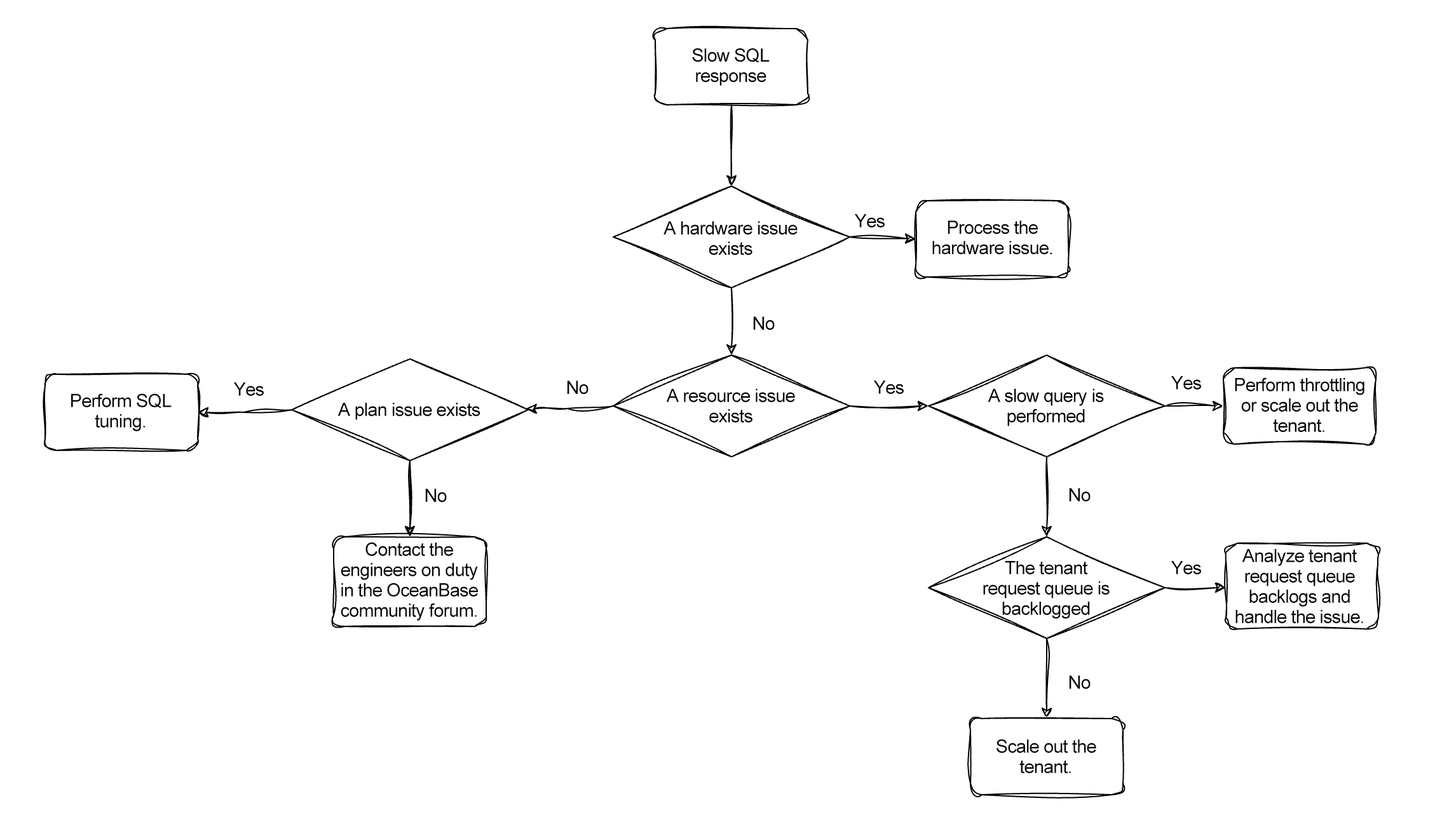
<style>
.page{position:relative;width:1435px;height:831px;background:#ffffff}
.page>*{position:absolute;margin:0}
.t1{font:18.4px/20.3px "ArialMT";letter-spacing:-0.03em;color:#060606}
.t2{font:18.4px "ArialMT";letter-spacing:-0.03em;color:#060606}
</style>
<div class="page">
<p class="t1" style="left:692px;top:48px;width:77px;height:38px;text-align:center">Slow SQL response</p>
<p class="t1" style="left:663px;top:221px;width:134px;height:34px;text-align:center">A hardware issue exists</p>
<p class="t2" style="left:855px;top:214px;width:29px;height:13px">Yes</p>
<p class="t1" style="left:932px;top:220px;width:120px;height:35px;text-align:center">Process the hardware issue.</p>
<p class="t2" style="left:753px;top:316px;width:22px;height:14px">No</p>
<p class="t2" style="left:1171px;top:376px;width:30px;height:14px">Yes</p>
<p class="t1" style="left:1235px;top:377px;width:129px;height:55px;text-align:center">Perform throttling or scale out the tenant.</p>
<p class="t2" style="left:234px;top:383px;width:30px;height:13px">Yes</p>
<p class="t2" style="left:567px;top:381px;width:21px;height:14px">No</p>
<p class="t1" style="left:666px;top:389px;width:129px;height:34px;text-align:center">A resource issue exists</p>
<p class="t2" style="left:874px;top:381px;width:30px;height:13px">Yes</p>
<p class="t1" style="left:987px;top:389px;width:117px;height:37px;text-align:center">A slow query is performed</p>
<p class="t1" style="left:71px;top:393px;width:101px;height:38px;text-align:center">Perform SQL tuning.</p>
<p class="t2" style="left:337px;top:403px;width:143px;height:17px">A plan issue exists</p>
<p class="t2" style="left:425px;top:489px;width:22px;height:14px">No</p>
<p class="t2" style="left:1069px;top:488px;width:21px;height:14px">No</p>
<p class="t1" style="left:341px;top:542px;width:137px;height:79px;text-align:center">Contact the engineers on duty in the OceanBase community forum.</p>
<p class="t1" style="left:1235px;top:549px;width:128px;height:74px;text-align:center">Analyze tenant request queue backlogs and handle the issue.</p>
<p class="t1" style="left:983px;top:561px;width:126px;height:58px;text-align:center">The tenant request queue is backlogged</p>
<p class="t2" style="left:1171px;top:561px;width:30px;height:13px">Yes</p>
<p class="t2" style="left:1069px;top:675px;width:21px;height:14px">No</p>
<p class="t1" style="left:996px;top:739px;width:100px;height:34px;text-align:center">Scale out the tenant.</p>
</div>
